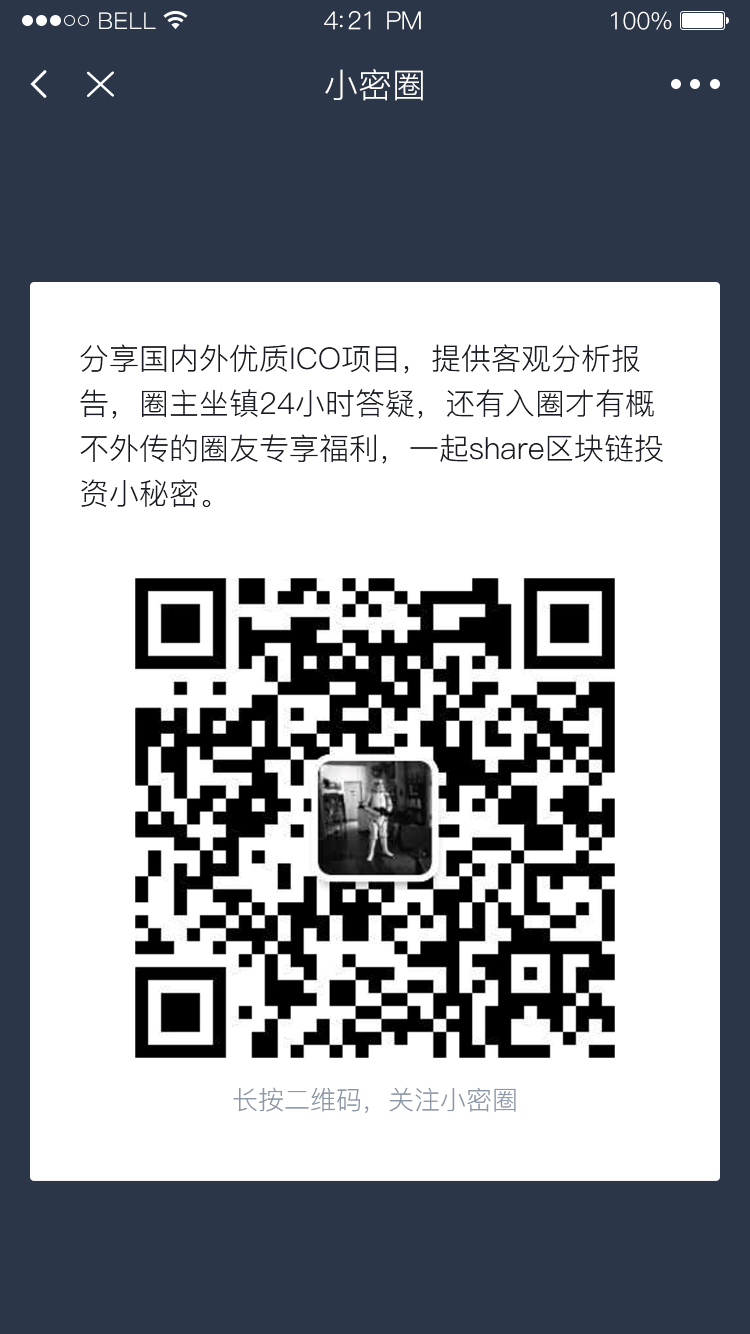
<style>
.page{position:relative;width:750px;height:1334px;background:#ffffff}
.page>*{position:absolute;margin:0}
.t1{font:23px "PingFang-SC-Regular";letter-spacing:0.02em;color:#ffffff}
.t2{font:25px "PingFang-SC-Regular";letter-spacing:-0.02em;color:#ffffff}
.t3{font:24px "PingFang-SC-Regular";letter-spacing:-0.02em;color:#ffffff}
.t4{font:34px "PingFang-SC-Regular";color:#ffffff}
.t5{font:30px/45px "PingFang-SC-Regular";color:#181b23}
.t6{font:26px "PingFang-SC-Regular";color:#8d98a7}
</style>
<div class="page">
<p class="t1" style="left:99px;top:12px;width:57px;height:17px">BELL</p>
<p class="t2" style="left:324px;top:11px;width:97px;height:19px">4:21 PM</p>
<p class="t3" style="left:611px;top:11px;width:61px;height:19px">100%</p>
<p class="t4" style="left:325px;top:69px;width:98px;height:32px">小密圈</p>
<p class="t5" style="left:80px;top:344px;width:583px;height:164px">分享国内外优质ICO项目，提供客观分析报<br>告，圈主坐镇24小时答疑，还有入圈才有概<br>不外传的圈友专享福利，一起share区块链投<br>资小秘密。</p>
<p class="t6" style="left:233px;top:1087px;width:283px;height:26px">长按二维码，关注小密圈</p>
</div>
